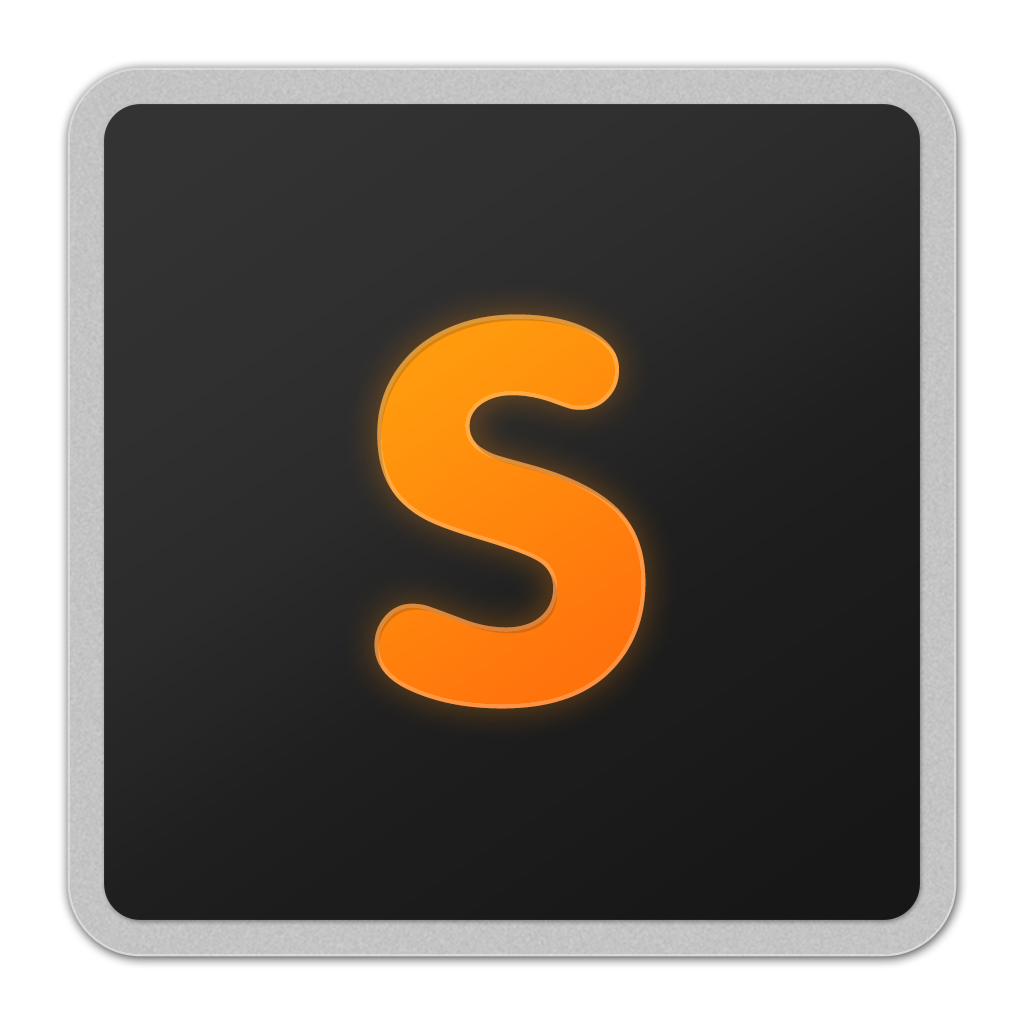
<style>
.page{position:relative;width:1024px;height:1024px;background:#ffffff}
.page>*{position:absolute;margin:0}
.t1{font:965.2px "VAGRundschriftD";color:#ff870d}
</style>
<div class="page">
<p class="t1" style="left:374px;top:314px;width:272px;height:395px">S</p>
</div>
